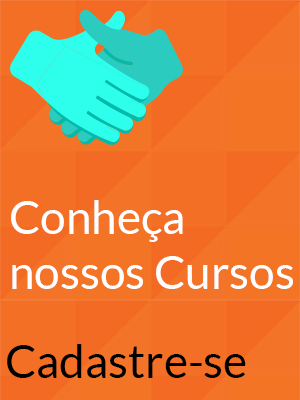
<style>
.page{position:relative;width:300px;height:400px;background:#f36f25}
.page>*{position:absolute;margin:0}
.t1{font:45.8px "Lato-Regular";color:#ffffff}
.t2{font:45.8px "Lato-Regular";color:#000000}
</style>
<div class="page">
<p class="t1" style="left:11px;top:200px;width:282px;height:89px">Conheça <br>nossos Cursos</p>
<p class="t2" style="left:7px;top:344px;width:239px;height:34px">Cadastre-se</p>
</div>
